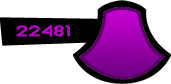
<style>
.page{position:relative;width:171px;height:84px;background:#ffffff}
.page>*{position:absolute;margin:0}
.t1{font:15.4px "Bobel";color:#ba00c6;font-weight:bold;scale:1.57 1}
</style>
<div class="page">
<p class="t1" style="left:16px;top:25px;width:54px;height:12px">22481</p>
</div>
